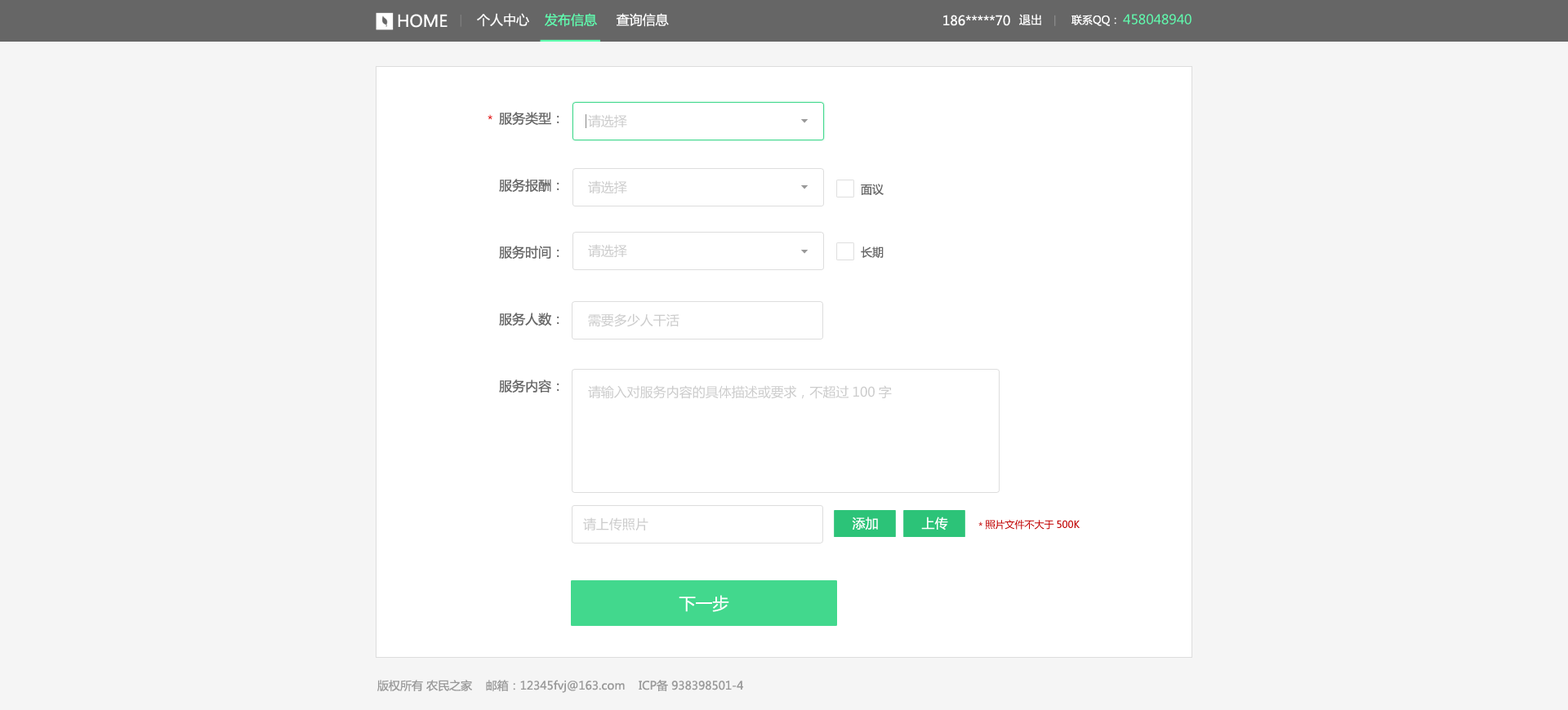
<style>
.page{position:relative;width:1568px;height:710px;background:#f5f5f5}
.page>*{position:absolute;margin:0}
.t1{font:16.3px "MicrosoftYaHei";color:#ffffff;text-transform:uppercase}
.t2{font:13.1px "MicrosoftYaHei";color:#ffffff;text-transform:uppercase}
.t3{font:13.1px "MicrosoftYaHei";color:#60fdaf;text-transform:uppercase}
.t4{font:11.4px "MicrosoftYaHei";color:#ffffff;text-transform:uppercase}
.t5{font:10.6px "MicrosoftYaHei";color:#ffffff;text-transform:uppercase}
.t6{font:13.1px/67px "MicrosoftYaHei";color:#666666}
.t7{font:12.2px "MicrosoftYaHei";scale:0.95 1}
.t8{font:13.1px "MicrosoftYaHei";color:#cccccc}
.t9{font:11.4px "MicrosoftYaHei";color:#666666}
.t10{font:13.1px "MicrosoftYaHei";color:#ffffff}
.t11{font:9.8px "MicrosoftYaHei";color:#c00000}
.t12{font:16.7px "MicrosoftYaHei";color:#ffffff;text-transform:uppercase}
.t13{font:11.4px "MicrosoftYaHei";color:#999999}
</style>
<div class="page">
<p class="t1" style="left:398px;top:14px;width:50px;height:14px">home</p>
<p class="t2" style="left:477px;top:13px;width:192px;height:14px">个人中心    <span class="t3">发布信息</span>     查询信息</p>
<p class="t2" style="left:943px;top:15px;width:67px;height:11px">186*****70</p>
<p class="t4" style="left:1019px;top:14px;width:22px;height:11px">退出</p>
<p class="t5" style="left:1071px;top:15px;width:45px;height:11px">联系qq：</p>
<p class="t3" style="left:1123px;top:14px;width:69px;height:10px">458048940</p>
<p class="t6" style="left:499px;top:112px;width:60px;height:281px;text-align:right">服务类型：<br>服务报酬：<br>服务时间：<br>服务人数：<br>服务内容：</p>
<p class="t7" style="left:488px;top:114px;width:4px;height:6px">*</p>
<p class="t8" style="left:588px;top:114px;width:39px;height:13px">请选择</p>
<p class="t8" style="left:588px;top:180px;width:39px;height:14px">请选择</p>
<p class="t9" style="left:861px;top:184px;width:23px;height:11px">面议</p>
<p class="t8" style="left:588px;top:244px;width:39px;height:13px">请选择</p>
<p class="t9" style="left:861px;top:247px;width:23px;height:11px">长期</p>
<p class="t8" style="left:588px;top:314px;width:91px;height:13px">需要多少人干活</p>
<p class="t8" style="left:588px;top:385px;width:304px;height:14px">请输入对服务内容的具体描述或要求，不超过100字</p>
<p class="t8" style="left:583px;top:518px;width:65px;height:13px">请上传照片</p>
<p class="t10" style="left:852px;top:517px;width:26px;height:14px">添加</p>
<p class="t10" style="left:921px;top:517px;width:27px;height:14px">上传</p>
<p class="t11" style="left:978px;top:520px;width:102px;height:10px">*照片文件不大于500K</p>
<p class="t12" style="left:679px;top:595px;width:50px;height:17px">下一步</p>
<p class="t13" style="left:377px;top:680px;width:366px;height:13px">版权所有 农民之家    邮箱：12345fvj@163.com    ICP备 938398501-4</p>
</div>
